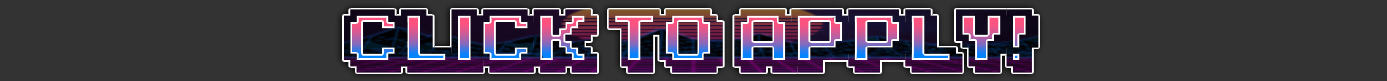
<style>
.page{position:relative;width:1387px;height:81px;background:#333333}
.page>*{position:absolute;margin:0}
.t1{font:64.8px "KarmaticArcade"}
</style>
<div class="page">
<p class="t1" style="left:344px;top:9px;width:695px;height:64px">Click to Apply!</p>
</div>
